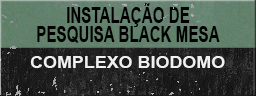
<style>
.page{position:relative;width:256px;height:96px}
.page>*{position:absolute;margin:0}
.t1{font:22px/19px "Arial-BoldMT";color:#000000;scale:0.69 1}
.t2{font:16.5px "Arial-BoldMT";color:#ffffff;scale:1.09 1}
</style>
<div class="page">
<p class="t1" style="left:37px;top:3px;width:183px;height:40px;text-align:center">INSTALAÇÃO DE<br>PESQUISA BLACK MESA</p>
<p class="t2" style="left:30px;top:56px;width:195px;height:12px;opacity:0.9">COMPLEXO BIODOMO</p>
</div>
